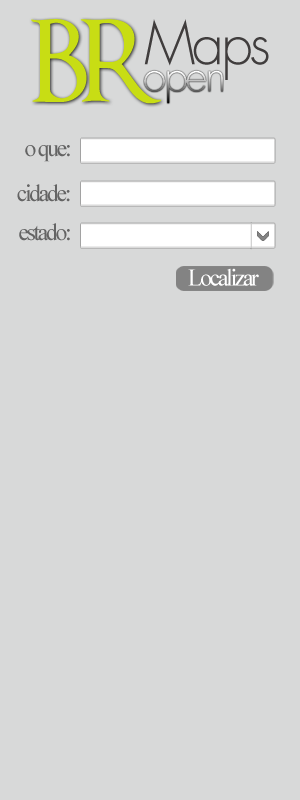
<style>
.page{position:relative;width:300px;height:800px;background:#d8d9d9}
.page>*{position:absolute;margin:0}
.t1{font:110.3px "OptimusPrinceps";letter-spacing:-0.095em;color:#c8dd14}
.t2{font:58px "FuturaStd-Light";letter-spacing:-0.055em;color:#403d3d}
.t3{font:43.8px "FuturaStd-Light";letter-spacing:-0.055em}
.t4{font:24px "TimesNewRomanPSMT";letter-spacing:-0.095em;color:#646464}
.t5{font:24px "TimesNewRomanPSMT";letter-spacing:-0.095em;color:#ffffff}
</style>
<div class="page">
<p class="t1" style="left:31px;top:19px;width:131px;height:85px">BR</p>
<p class="t2" style="left:144px;top:19px;width:125px;height:61px">Maps</p>
<p class="t3" style="left:144px;top:70px;width:79px;height:34px">open</p>
<p class="t4" style="left:25px;top:145px;width:45px;height:17px">o que:</p>
<p class="t4" style="left:17px;top:184px;width:53px;height:18px">cidade:</p>
<p class="t4" style="left:19px;top:223px;width:51px;height:18px">estado:</p>
<p class="t5" style="left:188px;top:268px;width:71px;height:18px">Localizar</p>
</div>
